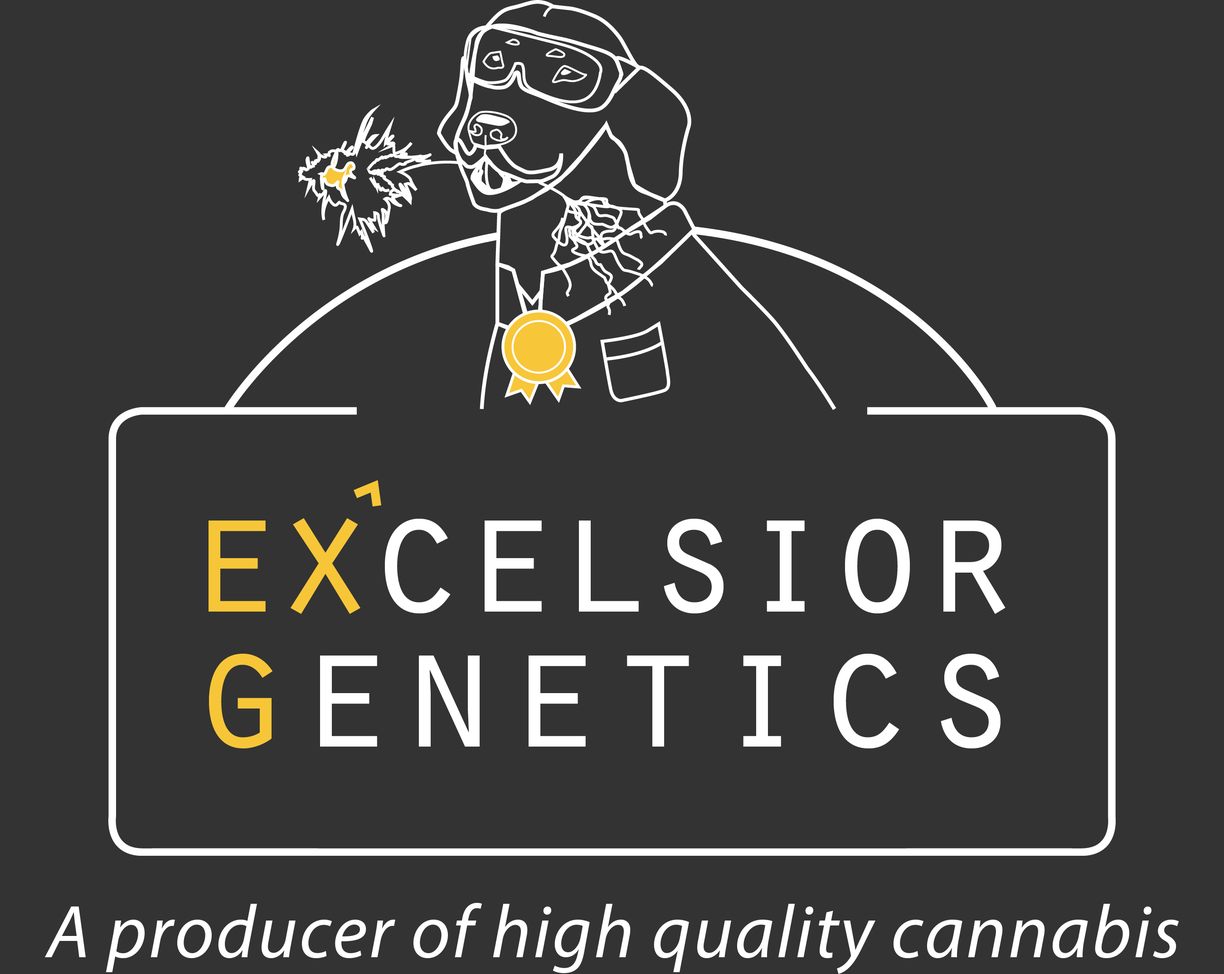
<style>
.page{position:relative;width:1224px;height:974px;background:#333333}
.page>*{position:absolute;margin:0}
.t1{font:75.5px "MyriadPro-It";letter-spacing:0.025em;color:#ffffff}
</style>
<div class="page">
<p class="t1" style="left:45px;top:903px;width:1134px;height:71px">A producer of high quality cannabis</p>
</div>
